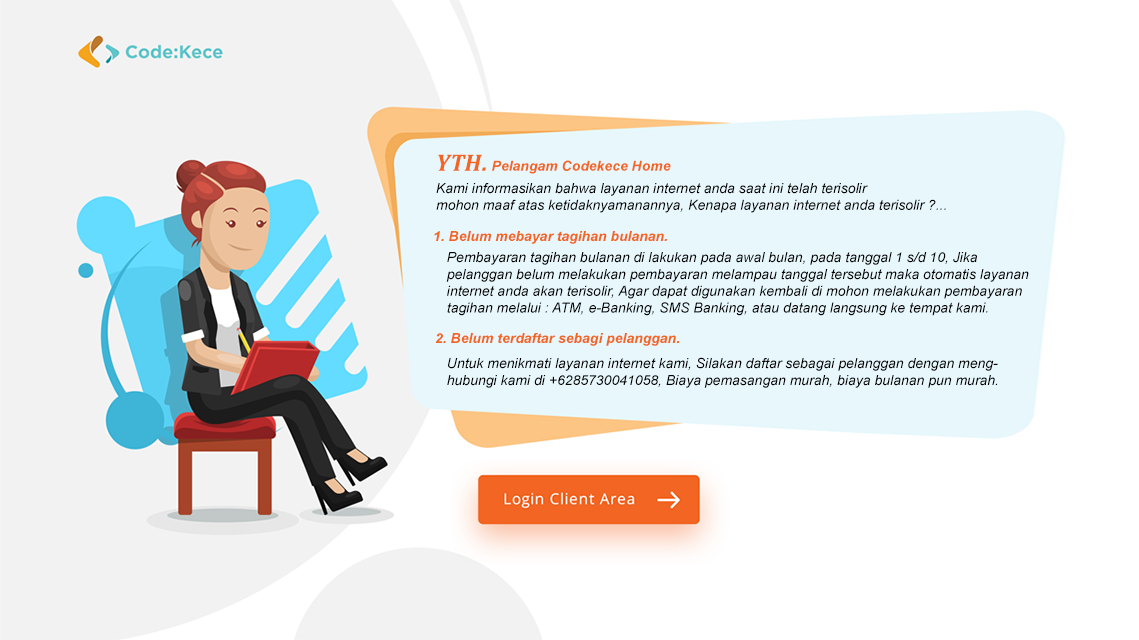
<style>
.page{position:relative;width:1139px;height:640px;background:#ffffff}
.page>*{position:absolute;margin:0}
.t1{font:14px "Arial-BoldItalicMT";color:#f26623}
.t2{font:24px "Cambria-BoldItalic";color:#f26522}
.t3{font:24px "Arial-BoldItalicMT";color:#f26623}
.t4{font:14px "Arial-ItalicMT";color:#000000}
.t5{font:14px "Arial-BoldItalicMT";color:#f26522}
</style>
<div class="page">
<p class="t1" style="left:438px;top:154px;width:233px;height:20px"><span class="t2">YTH</span><span class="t3">.</span> Pelangam Codekece Home</p>
<p class="t4" style="left:436px;top:183px;width:510px;height:30px">Kami informasikan bahwa layanan internet anda saat ini telah terisolir<br>mohon maaf atas ketidaknyamanannya, Kenapa layanan internet anda terisolir ?...</p>
<p class="t5" style="left:434px;top:231px;width:233px;height:13px">1. Belum mebayar tagihan bulanan.</p>
<p class="t4" style="left:446px;top:252px;width:583px;height:64px">Pembayaran tagihan bulanan di lakukan pada awal bulan, pada tanggal 1 s/d 10, Jika<br>pelanggan belum melakukan pembayaran melampau tanggal tersebut maka otomatis layanan<br>internet anda akan terisolir, Agar dapat digunakan kembali di mohon melakukan pembayaran<br>tagihan melalui : ATM, e-Banking, SMS Banking, atau datang langsung ke tempat kami.</p>
<p class="t5" style="left:435px;top:333px;width:245px;height:13px">2. Belum terdaftar sebagi pelanggan.</p>
<p class="t4" style="left:447px;top:357px;width:551px;height:31px">Untuk menikmati layanan internet kami, Silakan daftar sebagai pelanggan dengan meng-<br>hubungi kami di +6285730041058, Biaya pemasangan murah, biaya bulanan pun murah.</p>
</div>
